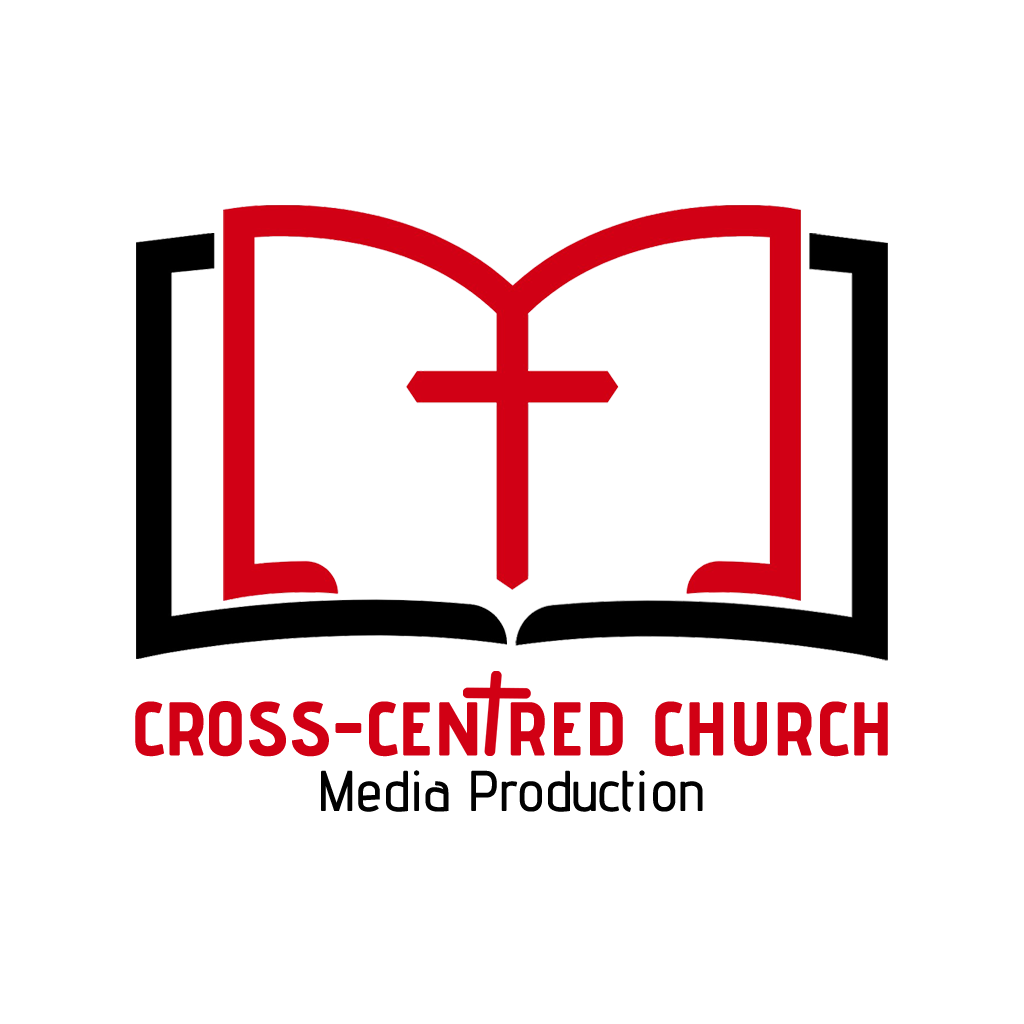
<style>
.page{position:relative;width:1024px;height:1024px;background:#ffffff}
.page>*{position:absolute;margin:0}
.t1{font:73px "AdventPro-Bold";color:#d10014;font-weight:bold}
.t2{font:55px "AdventPro-Regular";color:#010101;font-weight:bold}
</style>
<div class="page">
<p class="t1" style="left:135px;top:701px;width:753px;height:56px">CROSS-CEN RED CHURCH</p>
<p class="t2" style="left:321px;top:770px;width:382px;height:42px">Media Production</p>
</div>
